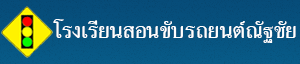
<style>
.page{position:relative;width:300px;height:64px}
.page>*{position:absolute;margin:0}
.t1{font:30px "CRULanChand56Bold";color:#ffffff}
</style>
<div class="page">
<p class="t1" style="left:53px;top:19px;width:243px;height:24px">โรงเรียนสอนขับรถยนต์ณัฐชัย</p>
</div>
